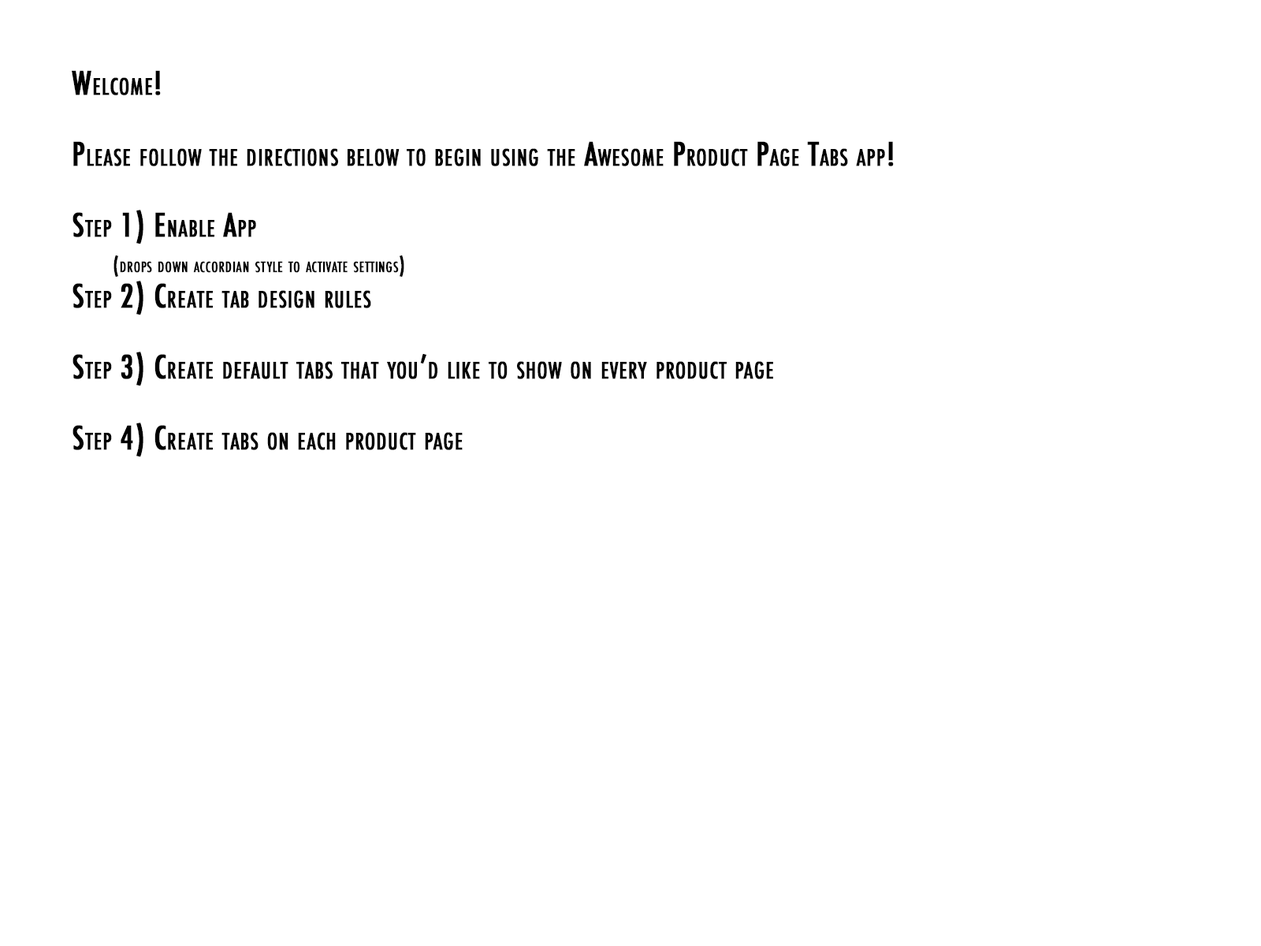
<style>
.page{position:relative;width:1261px;height:946px;background:#ffffff}
.page>*{position:absolute;margin:0}
.t1{font:31.5px/35.5px "Futura-CondensedMedium";letter-spacing:0.02em;color:#000000;font-variant:small-caps;font-weight:bold}
.t2{font:19.7px/35.5px "Futura-CondensedMedium";letter-spacing:0.02em;color:#000000;font-variant:small-caps;font-weight:bold}
</style>
<div class="page">
<p class="t1" style="left:72px;top:70px;width:822px;height:387px">Welcome!<br><br>Please follow the directions below to begin using the Awesome Product Page Tabs app!<br><br>Step 1) Enable App <br><span class="t2">        (drops down accordian style to activate settings)<br></span>Step 2) Create tab design rules<br><br>Step 3) Create default tabs that you’d like to show on every product page<br><br>Step 4) Create tabs on each product page</p>
</div>
